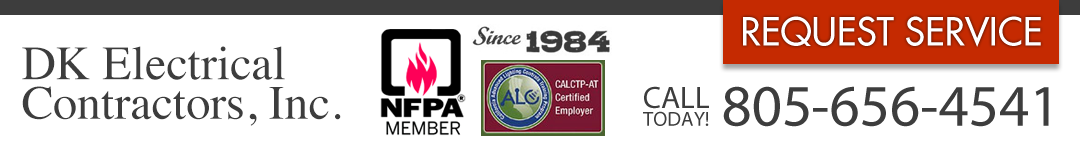
<style>
.page{position:relative;width:1080px;height:150px;background:#ffffff}
.page>*{position:absolute;margin:0}
.t1{font:37.7px "Futura";color:#fffeff}
.t2{font:47.9px/39.5px "Times-Roman";color:#3d3d3d}
.t3{font:20.6px/17.6px "MyriadPro-Regular";color:#3d3d3d}
.t4{font:31.3px/17.6px "MyriadPro-Regular";color:#3d3d3d}
.t5{font:59.1px "MyriadPro-Regular";color:#3d3d3d}
.t6{font:59.1px "MyriadPro-Regular";letter-spacing:-0.02em;color:#3d3d3d}
</style>
<div class="page">
<p class="t1" style="left:743px;top:16px;width:298px;height:31px">REQUEST SERVICE</p>
<p class="t2" style="left:22px;top:46px;width:319px;height:80px">DK Electrical<br>Contractors, Inc.</p>
<p class="t3" style="left:643px;top:86px;width:66px;height:40px;text-align:center"><span class="t4">CALL<br></span>TODAY!</p>
<p class="t5" style="left:723px;top:86px;width:326px;height:41px">80<span class="t6">5</span>-656-4541</p>
</div>
